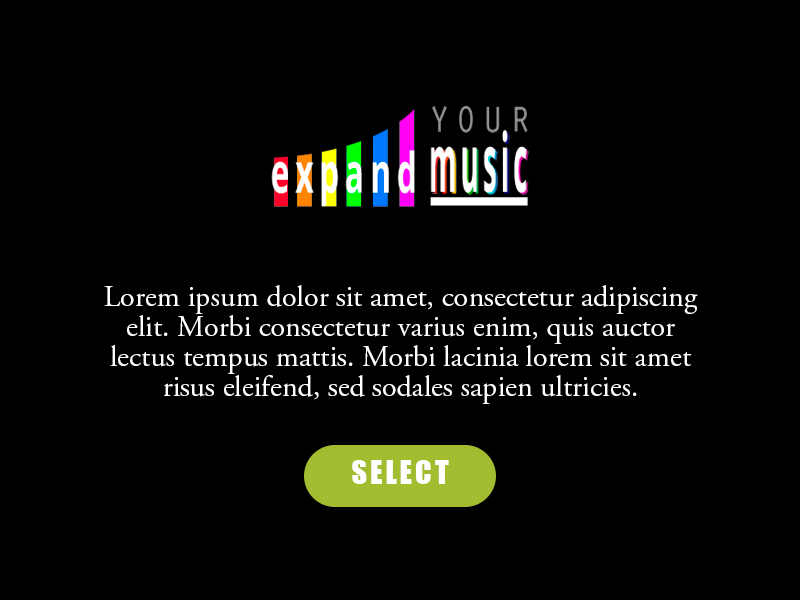
<style>
.page{position:relative;width:800px;height:600px;background:#000000}
.page>*{position:absolute;margin:0}
.t1{font:30px/30px "AGaramondPro-Regular";color:#ffffff}
.t2{font:30px "Impact";letter-spacing:0.1em;color:#ffffff}
</style>
<div class="page">
<p class="t1" style="left:104px;top:285px;width:594px;height:119px;text-align:center">Lorem ipsum dolor sit amet, consectetur adipiscing elit. Morbi consectetur varius enim, quis auctor lectus tempus mattis. Morbi lacinia lorem sit amet risus eleifend, sed sodales sapien ultricies.</p>
<p class="t2" style="left:352px;top:460px;width:97px;height:24px">SELECT</p>
</div>
